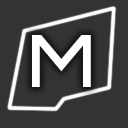
<style>
.page{position:relative;width:128px;height:128px;background:#333333}
.page>*{position:absolute;margin:0}
.t1{font:72px "Orbitron-Medium";color:#ffffff}
</style>
<div class="page">
<p class="t1" style="left:32px;top:35px;width:59px;height:52px">M</p>
</div>
